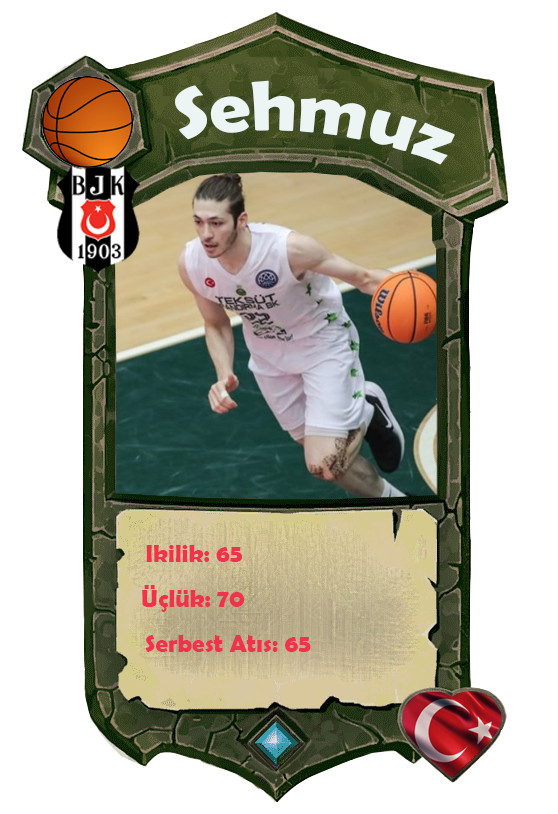
<style>
.page{position:relative;width:558px;height:814px;background:#ffffff}
.page>*{position:absolute;margin:0}
.t1{font:70.9px "BerlinSansFBDemi-Bold";color:#ecf4f4;scale:1.06 1}
.t2{font:25px "BerlinSansFBDemi-Bold";color:#f2314d}
</style>
<div class="page">
<p class="t1" style="left:175px;top:80px;width:280px;height:85px;rotate:6deg">Sehmuz</p>
<p class="t2" style="left:146px;top:545px;width:96px;height:17px">Ikilik: 65</p>
<p class="t2" style="left:142px;top:585px;width:103px;height:27px">Üçlük: 70</p>
<p class="t2" style="left:145px;top:635px;width:166px;height:17px">Serbest Atıs: 65</p>
</div>
